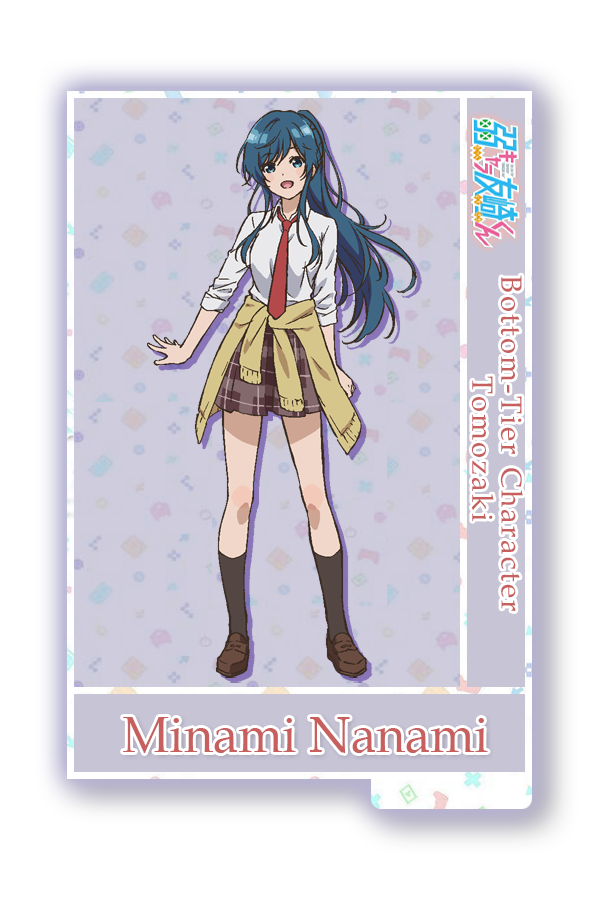
<style>
.page{position:relative;width:600px;height:900px;background:#ffffff}
.page>*{position:absolute;margin:0}
.t1{font:29.2px/29.2px "BookAntiqua";letter-spacing:0.08em;color:#c65f5d}
.t2{font:50px "BookAntiqua";color:#c65f5d}
</style>
<div class="page">
<p class="t1" style="left:471px;top:275px;width:52px;height:336px;text-align:center;rotate:90deg">Bottom-Tier Character <br>Tomozaki</p>
<p class="t2" style="left:123px;top:717px;width:365px;height:36px">Minami Nanami</p>
</div>
